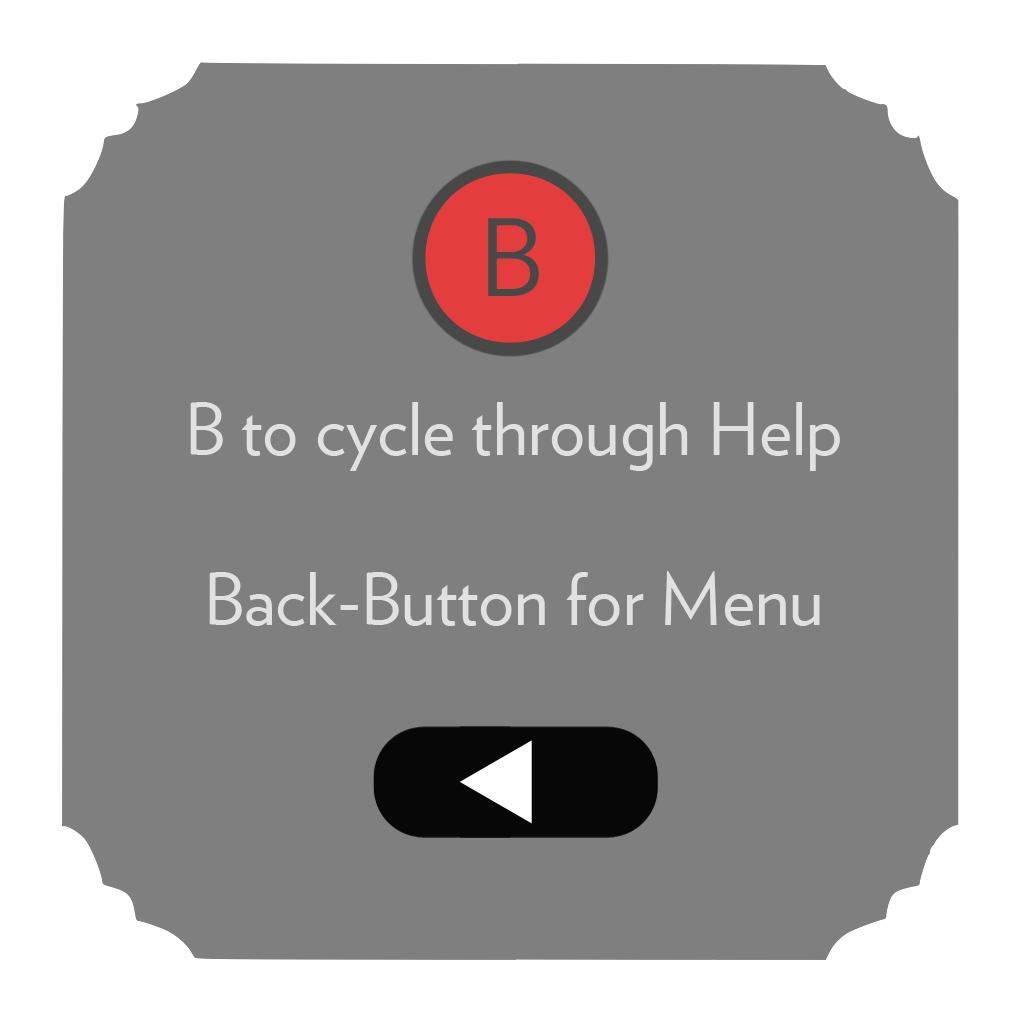
<style>
.page{position:relative;width:1024px;height:1024px;background:#7f7f7f}
.page>*{position:absolute;margin:0}
.t1{font:180px "WhitneyIndexBlack-RoundLt1";color:#f53d3d}
.t2{font:72px "Verlag-Book";color:#e1e1e1}
</style>
<div class="page">
<p class="t1" style="left:425px;top:173px;width:170px;height:170px;opacity:0.9">B</p>
<p class="t2" style="left:190px;top:402px;width:650px;height:69px">B to cycle through Help</p>
<p class="t2" style="left:209px;top:571px;width:611px;height:55px">Back-Button for Menu</p>
</div>
